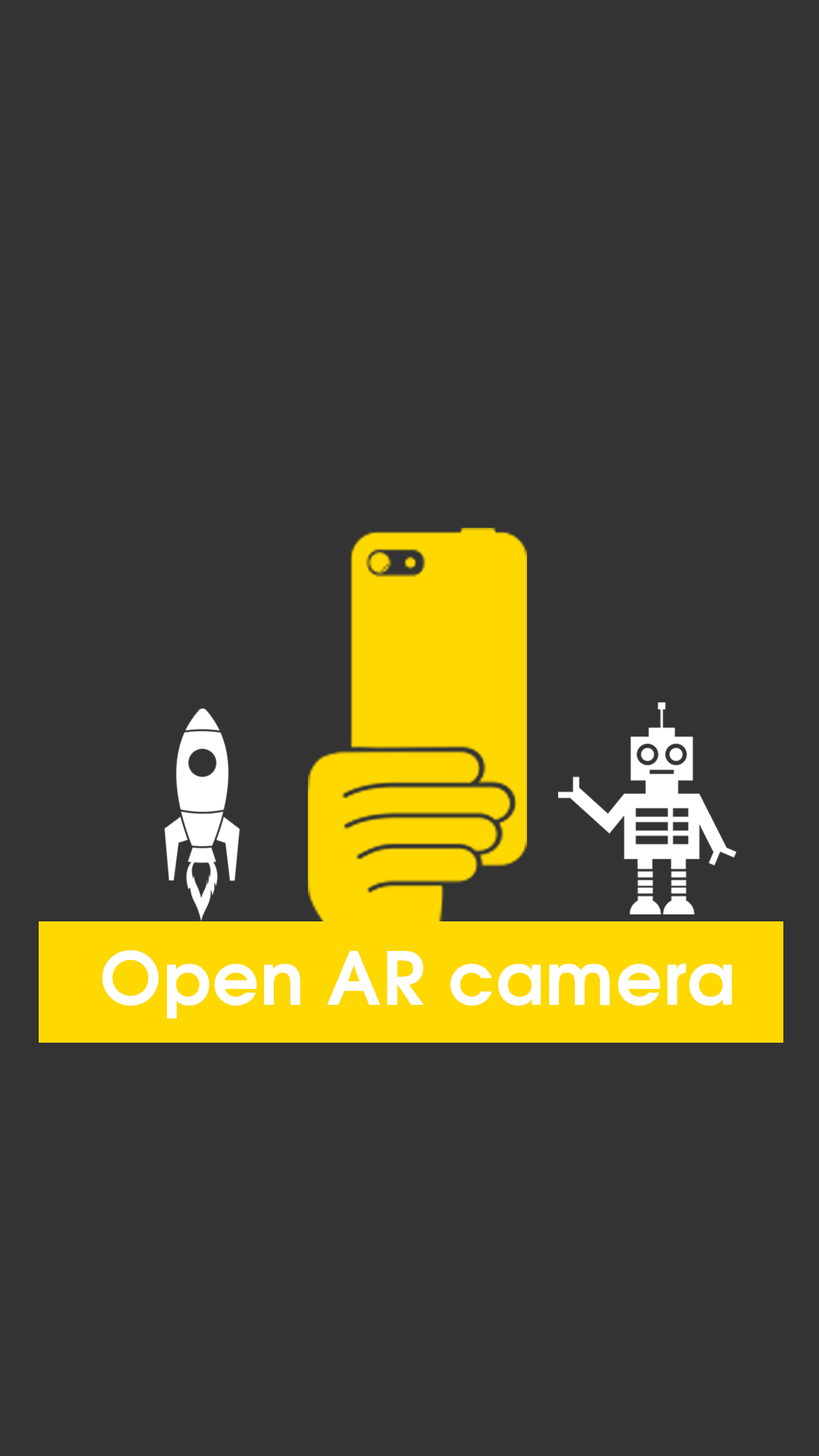
<style>
.page{position:relative;width:819px;height:1456px;background:#333333}
.page>*{position:absolute;margin:0}
.t1{font:73px "TeXGyreAdventor-Bold";letter-spacing:0.02em;color:#ffffff}
</style>
<div class="page">
<p class="t1" style="left:102px;top:950px;width:630px;height:68px">Open AR camera</p>
</div>
